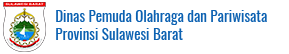
<style>
.page{position:relative;width:289px;height:54px;background:#ffffff}
.page>*{position:absolute;margin:0}
.t1{font:15px "Oswald-Regular";color:#0c61b1}
</style>
<div class="page">
<p class="t1" style="left:56px;top:10px;width:211px;height:30px">Dinas Pemuda Olahraga dan Pariwisata<br>Provinsi Sulawesi Barat</p>
</div>
